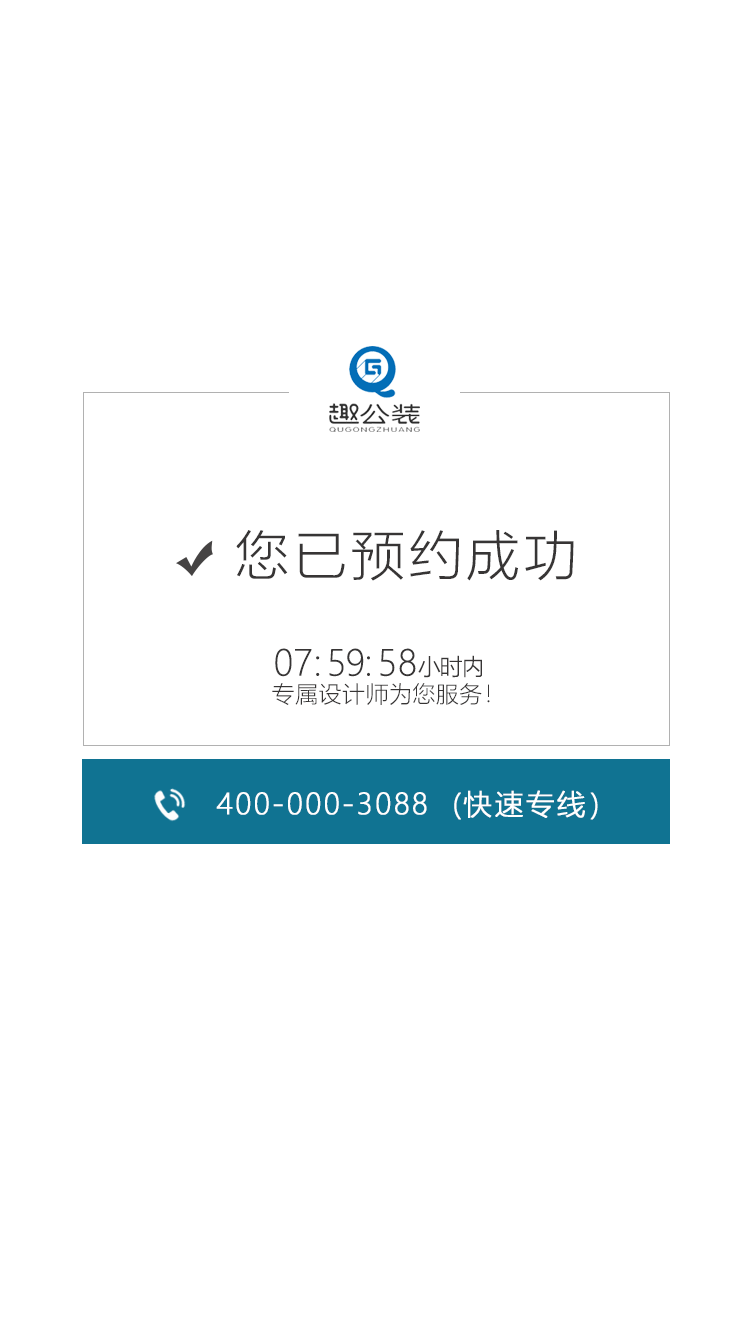
<style>
.page{position:relative;width:750px;height:1330px;background:#ffffff}
.page>*{position:absolute;margin:0}
.t1{font:53.4px "MicrosoftYaHeiLight";letter-spacing:0.08em;color:#373535}
.t2{font:22.8px "MicrosoftYaHeiLight";letter-spacing:-0.04em;color:#373535}
.t3{font:35px "MicrosoftYaHeiLight";letter-spacing:0.02em;color:#373535}
.t4{font:35px "MicrosoftYaHeiLight";letter-spacing:0.14em;color:#373535}
.t5{font:35px "MicrosoftYaHeiLight";letter-spacing:-0.02em;color:#373535}
.t6{font:23px "MicrosoftYaHeiLight";letter-spacing:0.02em;color:#373535}
.t7{font:28.6px "MicrosoftYaHeiLight";letter-spacing:0.06em;color:#ffffff;font-weight:bold}
</style>
<div class="page">
<p class="t1" style="left:236px;top:530px;width:338px;height:51px">您已预约成功</p>
<p class="t2" style="left:275px;top:648px;width:207px;height:30px"><span class="t3">07</span><span class="t4">:</span><span class="t5">59</span><span class="t4">:</span><span class="t3">58</span>小时内</p>
<p class="t6" style="left:272px;top:683px;width:218px;height:22px">专属设计师为您服务！</p>
<p class="t7" style="left:216px;top:790px;width:382px;height:30px">400-000-3088  (快速专线）</p>
</div>
